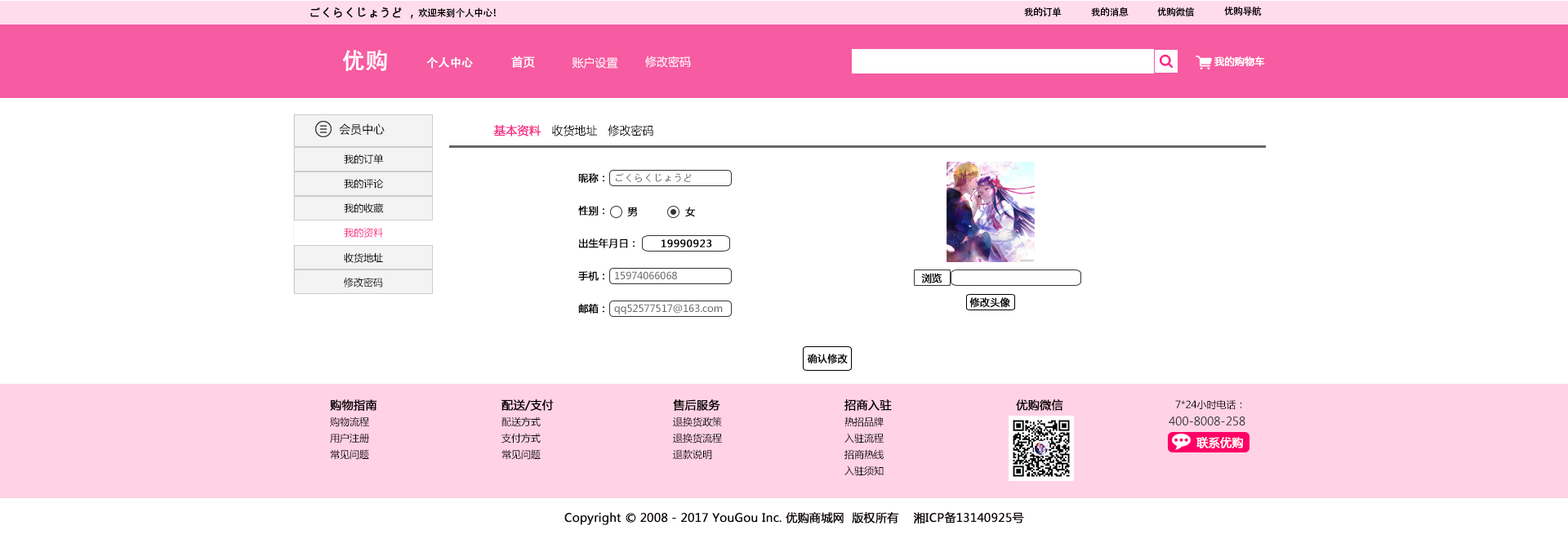
<style>
.page{position:relative;width:1568px;height:539px;background:#ffffff}
.page>*{position:absolute;margin:0}
.t1{font:11.4px "MicrosoftYaHei";color:#040000;font-weight:bold}
.t2{font:9.5px "AdobeHeitiStd-Regular";letter-spacing:-0.025em;color:#000000}
.t3{font:22.9px "AdobeHeitiStd-Regular";color:#ffffff;font-weight:bold}
.t4{font:11.4px "AdobeHeitiStd-Regular";color:#ffffff;font-weight:bold}
.t5{font:11.4px "MicrosoftYaHei";color:#ffffff;font-weight:bold}
.t6{font:11.4px "MicrosoftYaHei";color:#ffffff}
.t7{font:9.8px "MicrosoftYaHei";color:#ffffff;font-weight:bold}
.t8{font:11.4px "MicrosoftYaHei";color:#040000}
.t9{font:11.4px "MicrosoftYaHei";color:#f72b86;font-weight:bold}
.t10{font:11.4px "MicrosoftYaHei";color:#000000}
.t11{font:9.8px "MicrosoftYaHei";color:#040000}
.t12{font:9.8px "MicrosoftYaHei";color:#000000;font-weight:bold}
.t13{font:9.8px "MicrosoftYaHei";color:#666666}
.t14{font:9.8px "MicrosoftYaHei";color:#000000}
.t15{font:9.8px "MicrosoftYaHei";color:#060001}
.t16{font:9.8px "MicrosoftYaHei";color:#f72e88}
.t17{font:9.8px "MicrosoftYaHei";letter-spacing:0.05em;color:#000000;font-weight:bold}
.t18{font:11.4px "MicrosoftYaHei";color:#323333}
.t19{font:11.4px "MicrosoftYaHei";color:#0e050a;font-weight:bold}
</style>
<div class="page">
<p class="t1" style="left:310px;top:7px;width:186px;height:12px">ごくらくじょうど ，<span class="t2">欢迎来到个人中心！</span></p>
<p class="t2" style="left:1024px;top:7px;width:38px;height:10px">我的订单</p>
<p class="t2" style="left:1091px;top:7px;width:38px;height:9px">我的消息</p>
<p class="t2" style="left:1157px;top:7px;width:37px;height:10px">优购微信</p>
<p class="t2" style="left:1224px;top:7px;width:38px;height:9px">优购导航</p>
<p class="t3" style="left:342px;top:50px;width:45px;height:21px">优购</p>
<p class="t4" style="left:426px;top:57px;width:47px;height:12px">个人中心</p>
<p class="t5" style="left:511px;top:56px;width:24px;height:12px">首页</p>
<p class="t6" style="left:572px;top:57px;width:46px;height:12px">账户设置</p>
<p class="t6" style="left:645px;top:56px;width:46px;height:12px">修改密码</p>
<p class="t7" style="left:1214px;top:56px;width:51px;height:11px">我的购物车</p>
<p class="t8" style="left:339px;top:123px;width:46px;height:13px">会员中心</p>
<p class="t9" style="left:493px;top:125px;width:48px;height:11px">基本资料</p>
<p class="t10" style="left:552px;top:125px;width:46px;height:11px">收货地址</p>
<p class="t10" style="left:608px;top:125px;width:45px;height:11px">修改密码</p>
<p class="t11" style="left:344px;top:154px;width:40px;height:10px">我的订单</p>
<p class="t12" style="left:578px;top:173px;width:26px;height:10px">昵称：</p>
<p class="t13" style="left:616px;top:173px;width:76px;height:9px">ごくらくじょうど</p>
<p class="t14" style="left:344px;top:179px;width:40px;height:10px">我的评论</p>
<p class="t15" style="left:344px;top:203px;width:40px;height:10px">我的收藏</p>
<p class="t12" style="left:578px;top:206px;width:26px;height:10px">性别：</p>
<p class="t12" style="left:627px;top:207px;width:10px;height:9px">男</p>
<p class="t12" style="left:685px;top:207px;width:11px;height:10px">女</p>
<p class="t16" style="left:344px;top:227px;width:39px;height:11px">我的资料</p>
<p class="t12" style="left:579px;top:238px;width:56px;height:10px">出生年月日：</p>
<p class="t17" style="left:662px;top:239px;width:50px;height:8px">19990923</p>
<p class="t15" style="left:344px;top:253px;width:39px;height:10px">收货地址</p>
<p class="t15" style="left:344px;top:278px;width:39px;height:9px">修改密码</p>
<p class="t12" style="left:578px;top:271px;width:26px;height:10px">手机：</p>
<p class="t13" style="left:615px;top:271px;width:62px;height:8px">15974066068</p>
<p class="t12" style="left:921px;top:273px;width:21px;height:10px">浏览</p>
<p class="t12" style="left:578px;top:304px;width:26px;height:10px">邮箱：</p>
<p class="t13" style="left:614px;top:304px;width:109px;height:10px">qq52577517@163.com</p>
<p class="t12" style="left:969px;top:297px;width:41px;height:11px">修改头像</p>
<p class="t12" style="left:807px;top:354px;width:41px;height:10px">确认修改</p>
<p class="t1" style="left:330px;top:399px;width:47px;height:12px">购物指南</p>
<p class="t1" style="left:501px;top:399px;width:53px;height:12px">配送/支付</p>
<p class="t1" style="left:673px;top:399px;width:47px;height:12px">售后服务</p>
<p class="t1" style="left:844px;top:399px;width:48px;height:12px">招商入驻</p>
<p class="t1" style="left:1016px;top:399px;width:47px;height:12px">优购微信</p>
<p class="t11" style="left:1175px;top:399px;width:67px;height:11px">7*24小时电话：</p>
<p class="t11" style="left:330px;top:416px;width:39px;height:11px">购物流程</p>
<p class="t11" style="left:501px;top:416px;width:40px;height:11px">配送方式</p>
<p class="t11" style="left:673px;top:416px;width:49px;height:11px">退换货政策</p>
<p class="t11" style="left:844px;top:416px;width:40px;height:11px">热招品牌</p>
<p class="t18" style="left:1169px;top:416px;width:76px;height:9px">400-8008-258</p>
<p class="t11" style="left:330px;top:433px;width:39px;height:10px">用户注册</p>
<p class="t11" style="left:501px;top:433px;width:40px;height:10px">支付方式</p>
<p class="t11" style="left:673px;top:433px;width:49px;height:10px">退换货流程</p>
<p class="t11" style="left:844px;top:433px;width:40px;height:10px">入驻流程</p>
<p class="t5" style="left:1196px;top:437px;width:47px;height:11px">联系优购</p>
<p class="t11" style="left:330px;top:449px;width:39px;height:11px">常见问题</p>
<p class="t11" style="left:501px;top:449px;width:40px;height:11px">常见问题</p>
<p class="t11" style="left:673px;top:449px;width:39px;height:11px">退款说明</p>
<p class="t11" style="left:844px;top:449px;width:40px;height:11px">招商热线</p>
<p class="t11" style="left:844px;top:466px;width:40px;height:10px">入驻须知</p>
<p class="t19" style="left:564px;top:511px;width:460px;height:14px">Copyright © 2008 - 2017 YouGou Inc. 优购商城网  版权所有    湘ICP备13140925号</p>
</div>
